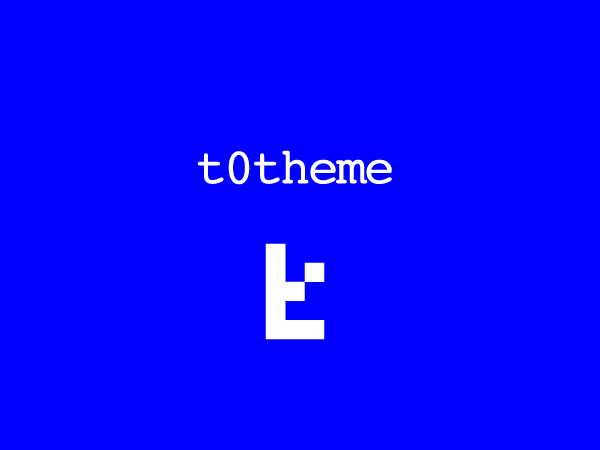
<style>
.page{position:relative;width:600px;height:450px;background:#0000ff}
.page>*{position:absolute;margin:0}
.t1{font:50.6px "Courier";letter-spacing:-0.04em;color:#ffffff}
</style>
<div class="page">
<p class="t1" style="left:197px;top:150px;width:195px;height:35px">t0theme</p>
</div>
